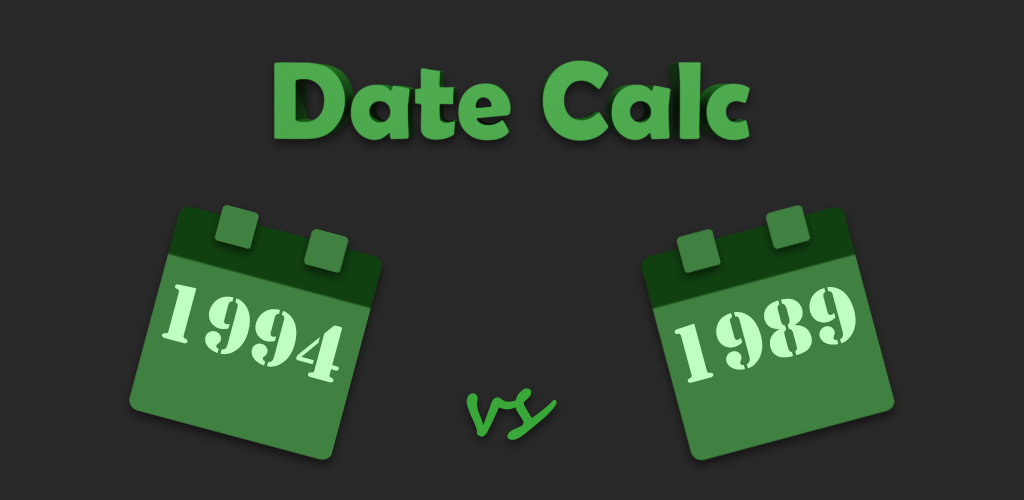
<style>
.page{position:relative;width:1024px;height:500px;background:#282828}
.page>*{position:absolute;margin:0}
.t1{font:84px "Stencil";color:#bfffbf}
.t2{font:84px "SegoeScript-Bold";color:#39a839}
</style>
<div class="page">
<p class="t1" style="left:162px;top:284px;width:180px;height:99px;rotate:15deg">1994</p>
<p class="t1" style="left:674px;top:287px;width:182px;height:96px;rotate:-15deg">1989</p>
<p class="t2" style="left:466px;top:388px;width:91px;height:52px">vs</p>
</div>
